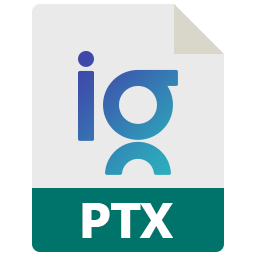
<style>
.page{position:relative;width:256px;height:256px;background:#eaeaea}
.page>*{position:absolute;margin:0}
.t1{font:48px "Tahoma-Bold";color:#ffffff}
</style>
<div class="page">
<p class="t1" style="left:82px;top:203px;width:91px;height:35px">PTX</p>
</div>
